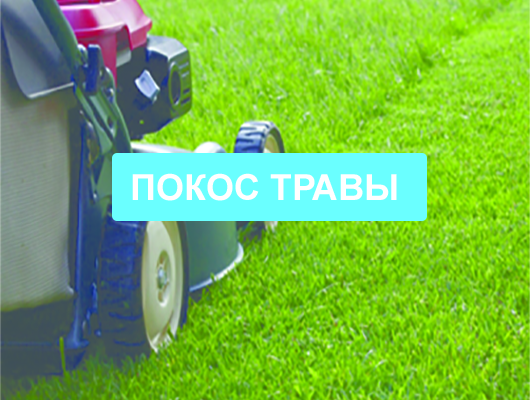
<style>
.page{position:relative;width:530px;height:400px}
.page>*{position:absolute;margin:0}
.t1{font:36px "Arial-BoldMT";color:#ffffff;text-transform:uppercase}
</style>
<div class="page">
<p class="t1" style="left:132px;top:173px;width:265px;height:28px">покос травы</p>
</div>
